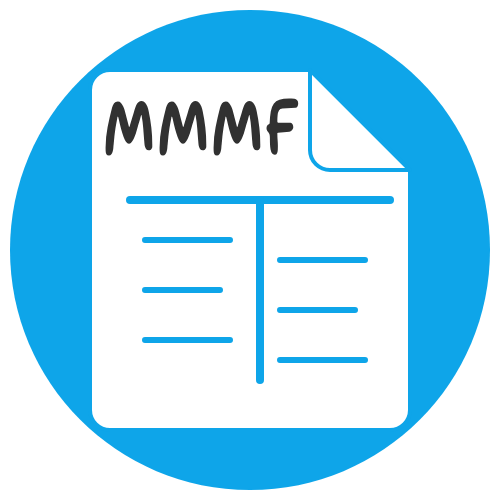
<style>
.page{position:relative;width:500px;height:500px;background:#ffffff}
.page>*{position:absolute;margin:0}
.t1{font:83px "FuzzyBubbles-Bold";color:#313131;scale:0.8 1}
</style>
<div class="page">
<p class="t1" style="left:105px;top:98px;width:194px;height:58px">MMMF</p>
</div>
